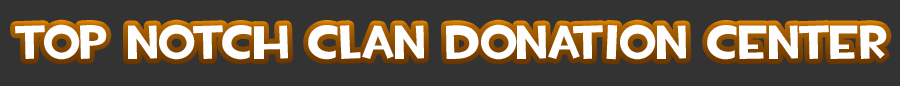
<style>
.page{position:relative;width:900px;height:86px;background:#333333}
.page>*{position:absolute;margin:0}
.t1{font:48px "TF2Build";color:#fefefe}
</style>
<div class="page">
<p class="t1" style="left:15px;top:24px;width:872px;height:36px">top notch clan Donation Center</p>
</div>
